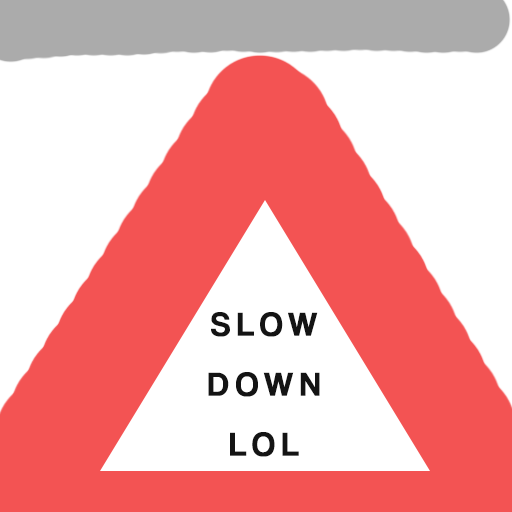
<style>
.page{position:relative;width:512px;height:512px;background:#ffffff}
.page>*{position:absolute;margin:0}
.t1{font:34.5px/60px "CoolveticaRg-Regular";letter-spacing:0.2em;color:#141414;text-transform:uppercase}
</style>
<div class="page">
<p class="t1" style="left:208px;top:312px;width:112px;height:145px;text-align:center">slow<br>down<br>lol</p>
</div>
